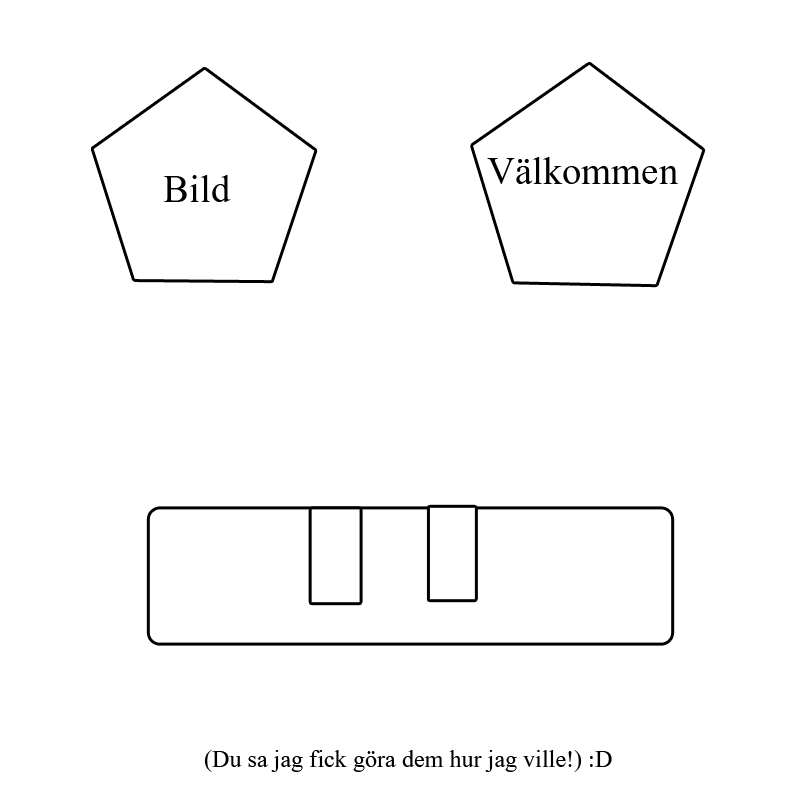
<style>
.page{position:relative;width:800px;height:800px;background:#ffffff}
.page>*{position:absolute;margin:0}
.t1{font:48px "Aparajita";color:#000000}
.t2{font:30px "Aparajita";color:#000000}
</style>
<div class="page">
<p class="t1" style="left:487px;top:157px;width:192px;height:27px">Välkommen</p>
<p class="t1" style="left:163px;top:175px;width:68px;height:27px">Bild</p>
<p class="t2" style="left:204px;top:750px;width:408px;height:22px">(Du sa jag fick göra dem hur jag ville!) :D</p>
</div>
